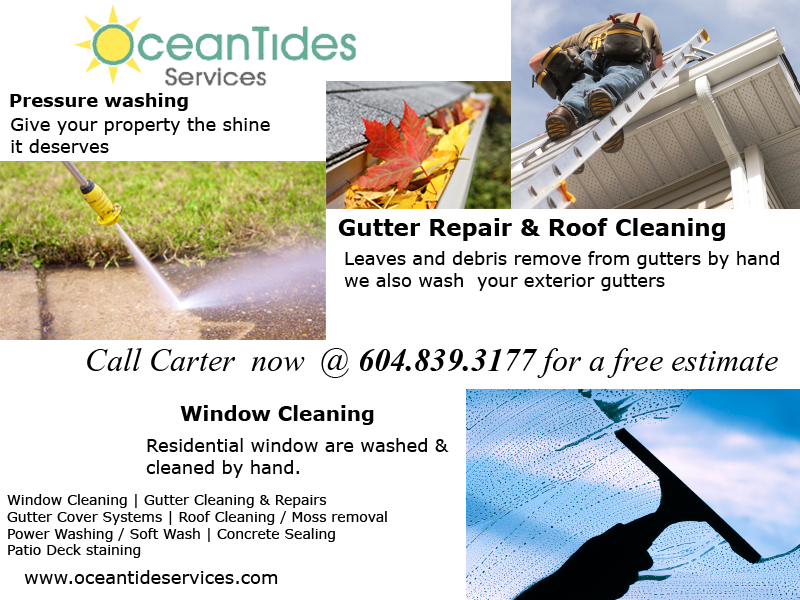
<style>
.page{position:relative;width:800px;height:600px;background:#ffffff}
.page>*{position:absolute;margin:0}
.t1{font:18px "Verdana-Bold";color:#010101}
.t2{font:18px "Verdana";color:#000000}
.t3{font:23px "Verdana-Bold";color:#000000}
.t4{font:18px "Verdana";color:#010101}
.t5{font:40px "Vijaya";color:#000000}
.t6{font:40px "Vijaya-Bold";color:#000000}
.t7{font:20px "Verdana-Bold";color:#010101}
.t8{font:14px "Verdana";color:#000000}
</style>
<div class="page">
<p class="t1" style="left:10px;top:93px;width:178px;height:18px">Pressure washing</p>
<p class="t2" style="left:11px;top:117px;width:259px;height:36px">Give your property the shine<br> it deserves</p>
<p class="t3" style="left:338px;top:218px;width:387px;height:23px">Gutter Repair &amp; Roof Cleaning</p>
<p class="t4" style="left:344px;top:251px;width:435px;height:40px">Leaves and debris remove from gutters by hand<br>we also wash  your exterior gutters</p>
<p class="t5" style="left:87px;top:348px;width:691px;height:30px">Call Carter  now  @ <span class="t6">604.839.3177 </span>for a free estimate</p>
<p class="t7" style="left:180px;top:405px;width:194px;height:20px">Window Cleaning</p>
<p class="t4" style="left:146px;top:438px;width:303px;height:40px">Residential window are washed &amp;<br>cleaned by hand.</p>
<p class="t8" style="left:7px;top:494px;width:380px;height:64px">Window Cleaning | Gutter Cleaning &amp; Repairs<br>Gutter Cover Systems | Roof Cleaning / Moss removal<br>Power Washing / Soft Wash | Concrete Sealing<br>Patio Deck staining</p>
<p class="t4" style="left:24px;top:570px;width:254px;height:14px">www.oceantideservices.com</p>
</div>
